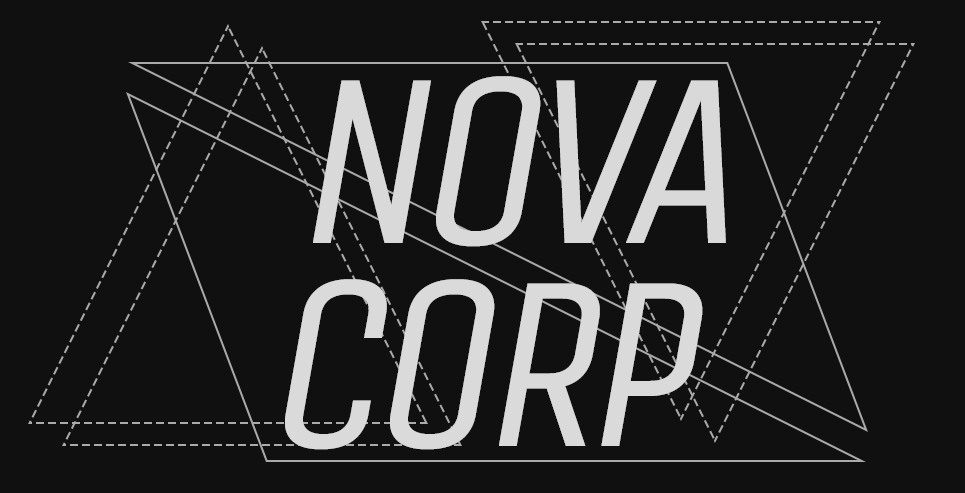
<style>
.page{position:relative;width:965px;height:493px;background:#101010}
.page>*{position:absolute;margin:0}
.t1{font:250px "UnicaOne-Regular";letter-spacing:-0.05em;color:#d9d9d9;font-style:italic}
.t2{font:250px "UnicaOne-Regular";letter-spacing:-0.05em;color:#dadada;font-style:italic}
</style>
<div class="page">
<p class="t1" style="left:313px;top:76px;width:413px;height:171px">NOVA</p>
<p class="t1" style="left:313px;top:76px;width:413px;height:171px">NOVA</p>
<p class="t2" style="left:285px;top:279px;width:418px;height:171px">CORP</p>
<p class="t2" style="left:285px;top:279px;width:418px;height:171px">CORP</p>
</div>
